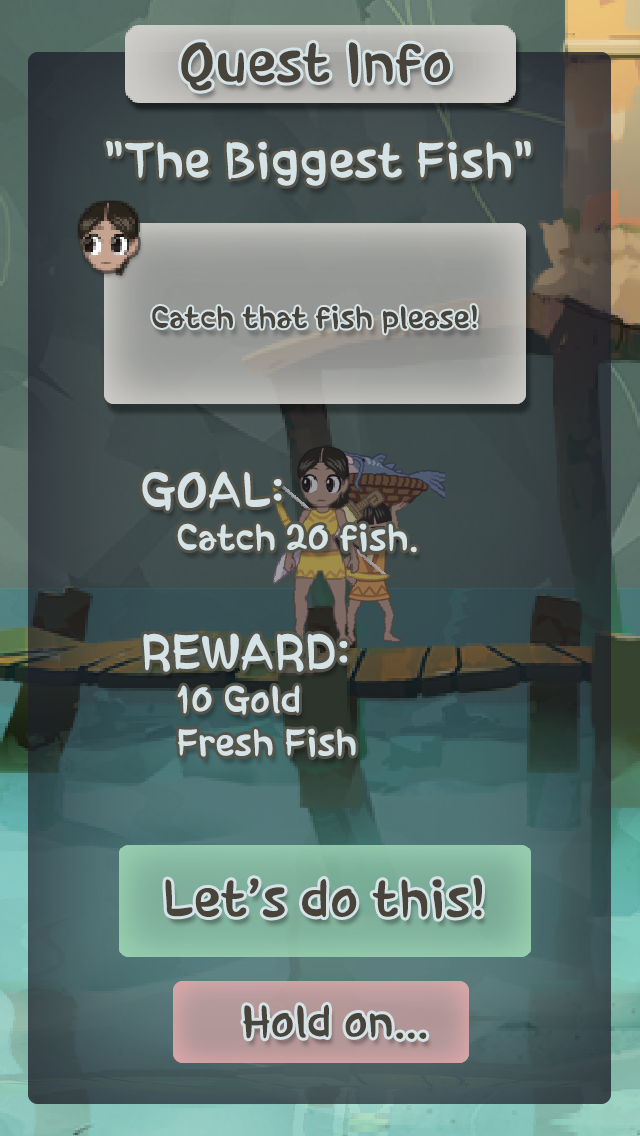
<style>
.page{position:relative;width:640px;height:1136px}
.page>*{position:absolute;margin:0}
.t1{font:54px "HoonWhayangyunwhaR";color:#48443c}
.t2{font:48px "HoonWhayangyunwhaR";color:#d6e3e6}
.t3{font:30px "HoonWhayangyunwhaR";color:#48443c}
.t4{font:36px "HoonWhayangyunwhaR";color:#d6e3e6}
.t5{font:50.6px "HoonWhayangyunwhaR";color:#48443c}
.t6{font:42.7px "HoonWhayangyunwhaR";color:#48443c}
</style>
<div class="page">
<p class="t1" style="left:181px;top:42px;width:269px;height:49px">Quest Info</p>
<p class="t2" style="left:106px;top:141px;width:425px;height:45px">"The Biggest Fish"</p>
<p class="t3" style="left:152px;top:305px;width:325px;height:29px">Catch that fish please!</p>
<p class="t4" style="left:142px;top:471px;width:275px;height:82px"><span class="t2">GOAL:<br></span> Catch 20 fish.</p>
<p class="t4" style="left:143px;top:633px;width:213px;height:124px"><span class="t2">REWARD:<br></span> 10 Gold<br> Fresh Fish</p>
<p class="t5" style="left:165px;top:877px;width:317px;height:42px">Let’s do this!</p>
<p class="t6" style="left:243px;top:1004px;width:184px;height:35px">Hold on...</p>
</div>
